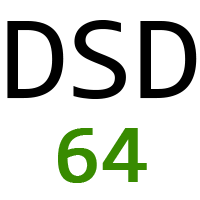
<style>
.page{position:relative;width:200px;height:200px;background:#ffffff}
.page>*{position:absolute;margin:0}
.t1{font:120.8px "Consolas";color:#000000}
.t2{font:83.3px "Consolas";color:#388b00;font-weight:bold}
</style>
<div class="page">
<p class="t1" style="left:7px;top:20px;width:190px;height:79px">DSD</p>
<p class="t2" style="left:58px;top:128px;width:89px;height:55px">64</p>
</div>
